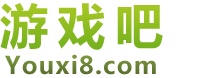
<style>
.page{position:relative;width:214px;height:78px;background:#ffffff}
.page>*{position:absolute;margin:0}
.t1{font:48px "MicrosoftYaHei-Bold";letter-spacing:0.2em;color:#8ebd20}
.t2{font:12px "MicrosoftYaHei-Bold";letter-spacing:0.05em;color:#677f34}
</style>
<div class="page">
<p class="t1" style="left:0px;top:3px;width:163px;height:47px">游戏吧</p>
<p class="t2" style="left:5px;top:54px;width:151px;height:21px">Youxi8.com</p>
</div>
